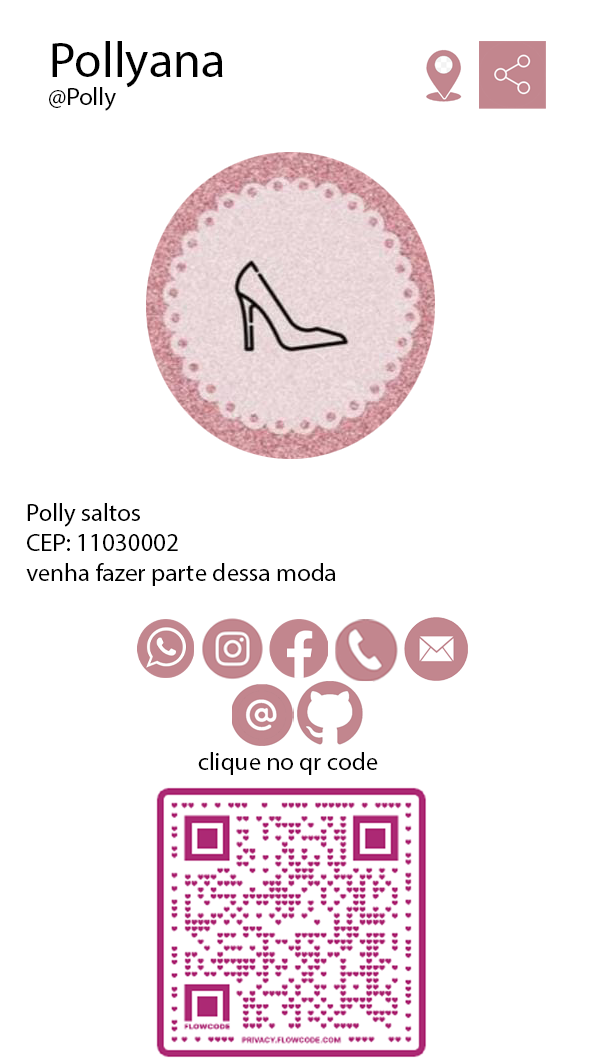
<style>
.page{position:relative;width:591px;height:1063px;background:#ffffff}
.page>*{position:absolute;margin:0}
.t1{font:50px "MyriadPro-Regular";color:#000000}
.t2{font:25px "MyriadPro-Regular";color:#000000}
</style>
<div class="page">
<p class="t1" style="left:52px;top:41px;width:171px;height:47px">Pollyana</p>
<p class="t2" style="left:49px;top:87px;width:67px;height:24px">@Polly</p>
<p class="t2" style="left:26px;top:503px;width:310px;height:83px">Polly saltos<br>CEP: 11030002<br>venha fazer parte dessa moda</p>
<p class="t2" style="left:198px;top:752px;width:180px;height:23px">clique no qr code</p>
</div>
